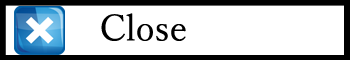
<style>
.page{position:relative;width:350px;height:60px;background:#ffffff}
.page>*{position:absolute;margin:0}
.t1{font:36px "YuMincho-Regular";color:#000000}
</style>
<div class="page">
<p class="t1" style="left:101px;top:13px;width:85px;height:28px">Close</p>
</div>
